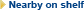
<style>
.page{position:relative;width:84px;height:10px;background:#ffffff}
.page>*{position:absolute;margin:0}
.t1{font:10px "Arial-BoldMT";color:#014184}
</style>
<div class="page">
<p class="t1" style="left:9px;top:1px;width:75px;height:9px">Nearby on shelf</p>
</div>
